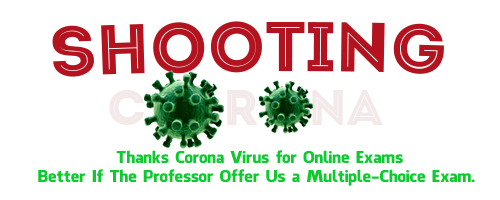
<style>
.page{position:relative;width:500px;height:200px;background:#ffffff}
.page>*{position:absolute;margin:0}
.t1{font:70px "VNF-IntroInlineFat";color:#af1616}
.t2{font:50px "VNF-IntroInlineFat";color:#f4e9e9}
.t3{font:16px "UTM-Facebook";color:#0eca30}
</style>
<div class="page">
<p class="t1" style="left:52px;top:21px;width:392px;height:56px">SHooTING</p>
<p class="t2" style="left:109px;top:90px;width:274px;height:35px">c      r    na</p>
<p class="t3" style="left:38px;top:150px;width:437px;height:36px;text-align:center">Thanks Corona Virus for Online Exams<br>Better If The Professor Offer Us a Multiple-Choice Exam.</p>
</div>
